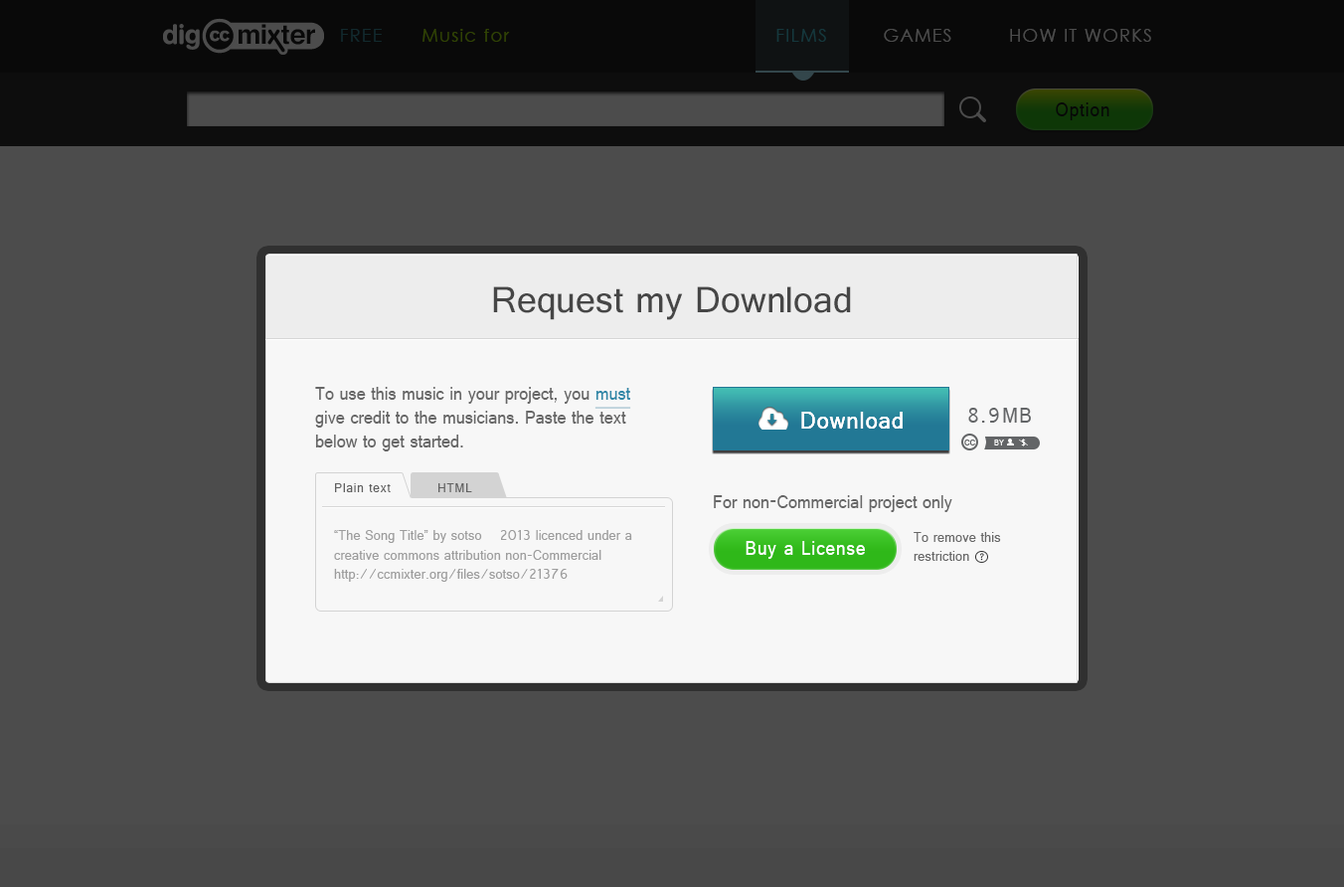
<style>
.page{position:relative;width:1344px;height:887px;background:#4c4c4c}
.page>*{position:absolute;margin:0}
.t1{font:39.6px "Raavi";color:#464646}
.t2{font:19.9px "Raavi";color:#676767;scale:0.9 1}
.t3{font:19.9px "Raavi";color:#3288a8;text-decoration:underline;scale:0.9 1}
.t4{font:26.2px "Raavi";letter-spacing:0.05em;color:#ffffff;scale:0.9 1}
.t5{font:23.5px "Raavi";letter-spacing:0.05em;color:#636567;scale:0.9 1}
.t6{font:13.1px "Raavi";color:#636567;scale:0.9 1}
.t7{font:8.6px "Raavi";color:#ffffff;scale:0.93 1}
.t8{font:14.4px "Raavi";letter-spacing:0.05em;color:#616161;scale:0.92 1}
.t9{font:15.9px "Raavi";color:#9d9d9d;scale:0.9 1}
.t10{font:15.9px "Raavi";color:#676767;scale:0.9 1}
.t11{font:20.9px "Raavi";letter-spacing:0.05em;color:#ffffff;scale:0.9 1}
.t12{font:9px "Raavi";letter-spacing:0.05em;color:#303030}
</style>
<div class="page">
<p class="t1" style="left:493px;top:286px;width:358px;height:34px">Request my Download</p>
<p class="t2" style="left:315px;top:387px;width:316px;height:64px">To use this music in your project, you <span class="t3">must</span> give credit to the musicians. Paste the text below to get started.</p>
<p class="t4" style="left:801px;top:412px;width:102px;height:17px">Download</p>
<p class="t4" style="left:801px;top:412px;width:102px;height:17px">Download</p>
<p class="t5" style="left:969px;top:408px;width:62px;height:15px">8.9MB</p>
<p class="t6" style="left:965px;top:440px;width:10px;height:5px">cc</p>
<p class="t7" style="left:994px;top:440px;width:10px;height:5px">BY</p>
<p class="t7" style="left:1021px;top:439px;width:5px;height:7px">$</p>
<p class="t8" style="left:335px;top:483px;width:56px;height:9px">Plain text</p>
<p class="t8" style="left:439px;top:483px;width:33px;height:9px">HTML</p>
<p class="t2" style="left:714px;top:495px;width:239px;height:17px">For non-Commercial project only</p>
<p class="t9" style="left:334px;top:530px;width:298px;height:52px">“The Song Title” by sotso    2013 licenced under a creative commons attribution non-Commercial<br>http://ccmixter.org/files/sotso/21376</p>
<p class="t10" style="left:914px;top:532px;width:87px;height:29px">To remove this<br>restriction</p>
<p class="t11" style="left:746px;top:541px;width:119px;height:18px">Buy a License</p>
<p class="t12" style="left:979px;top:553px;width:5px;height:8px">?</p>
</div>
